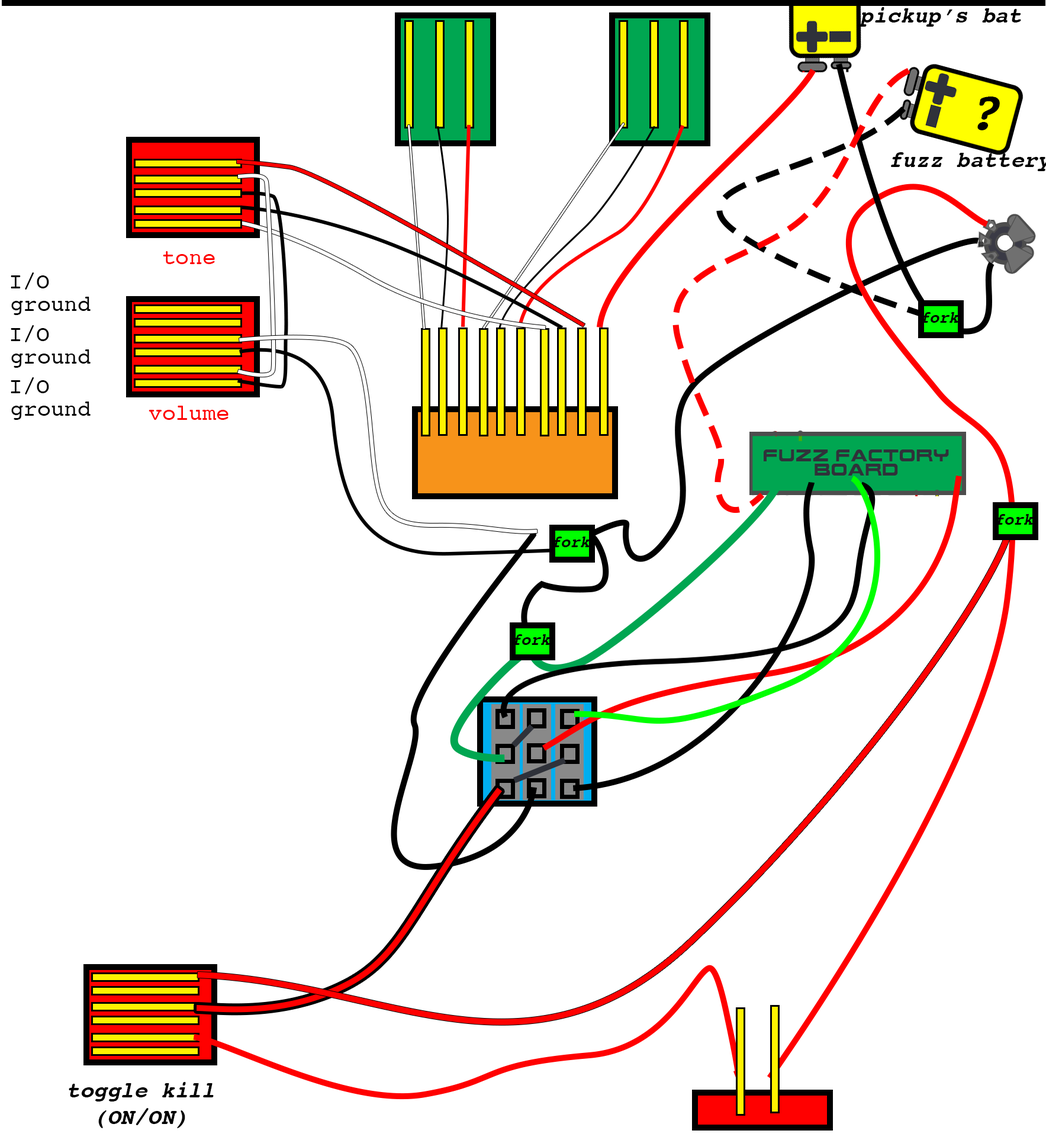
<style>
.page{position:relative;width:1046px;height:1140px;background:#ffffff}
.page>*{position:absolute;margin:0}
.t1{font:22.5px "Courier-BoldOblique";color:#000000}
.t2{font:53.9px "Courier-BoldOblique";color:#000000}
.t3{font:22.5px "Courier";color:#fe0000}
.t4{font:22.5px "Courier";color:#000000}
.t5{font:16.6px "Courier-BoldOblique";color:#000000;scale:0.97 1}
</style>
<div class="page">
<p class="t1" style="left:859px;top:7px;width:162px;height:20px">pickup’s bat</p>
<p class="t2" style="left:978px;top:97px;width:22px;height:33px">?</p>
<p class="t3" style="left:163px;top:251px;width:52px;height:13px">tone</p>
<p class="t4" style="left:11px;top:272px;width:38px;height:18px">I/O</p>
<p class="t4" style="left:11px;top:297px;width:80px;height:18px">ground</p>
<p class="t5" style="left:921px;top:312px;width:38px;height:11px">fork</p>
<p class="t4" style="left:11px;top:325px;width:38px;height:17px">I/O</p>
<p class="t4" style="left:11px;top:349px;width:80px;height:19px">ground</p>
<p class="t4" style="left:11px;top:377px;width:38px;height:17px">I/O</p>
<p class="t4" style="left:11px;top:401px;width:80px;height:19px">ground</p>
<p class="t3" style="left:149px;top:406px;width:80px;height:14px">volume</p>
<p class="t5" style="left:996px;top:514px;width:38px;height:11px">fork</p>
<p class="t5" style="left:552px;top:536px;width:38px;height:11px">fork</p>
<p class="t5" style="left:513px;top:634px;width:38px;height:11px">fork</p>
<p class="t1" style="left:69px;top:1082px;width:145px;height:46px;text-align:center">toggle kill<br>(ON/ON)</p>
</div>
